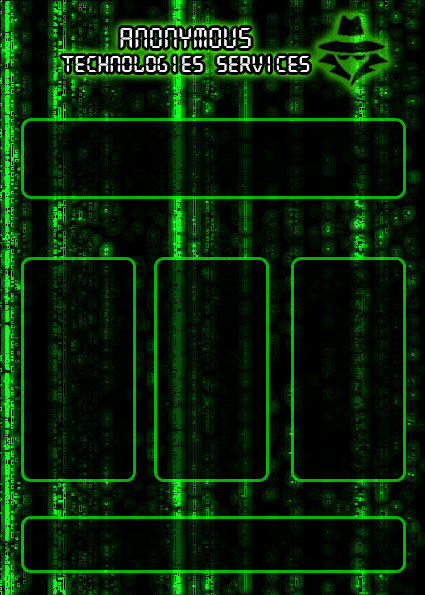
<style>
.page{position:relative;width:425px;height:595px;background:#000000}
.page>*{position:absolute;margin:0}
.t1{font:30px "Quartz-Regular";color:#ffffff}
.t2{font:24px "Quartz-Regular";color:#ffffff}
</style>
<div class="page">
<p class="t1" style="left:120px;top:28px;width:131px;height:20px">anonymous</p>
<p class="t2" style="left:62px;top:56px;width:248px;height:16px">technologies services</p>
</div>
